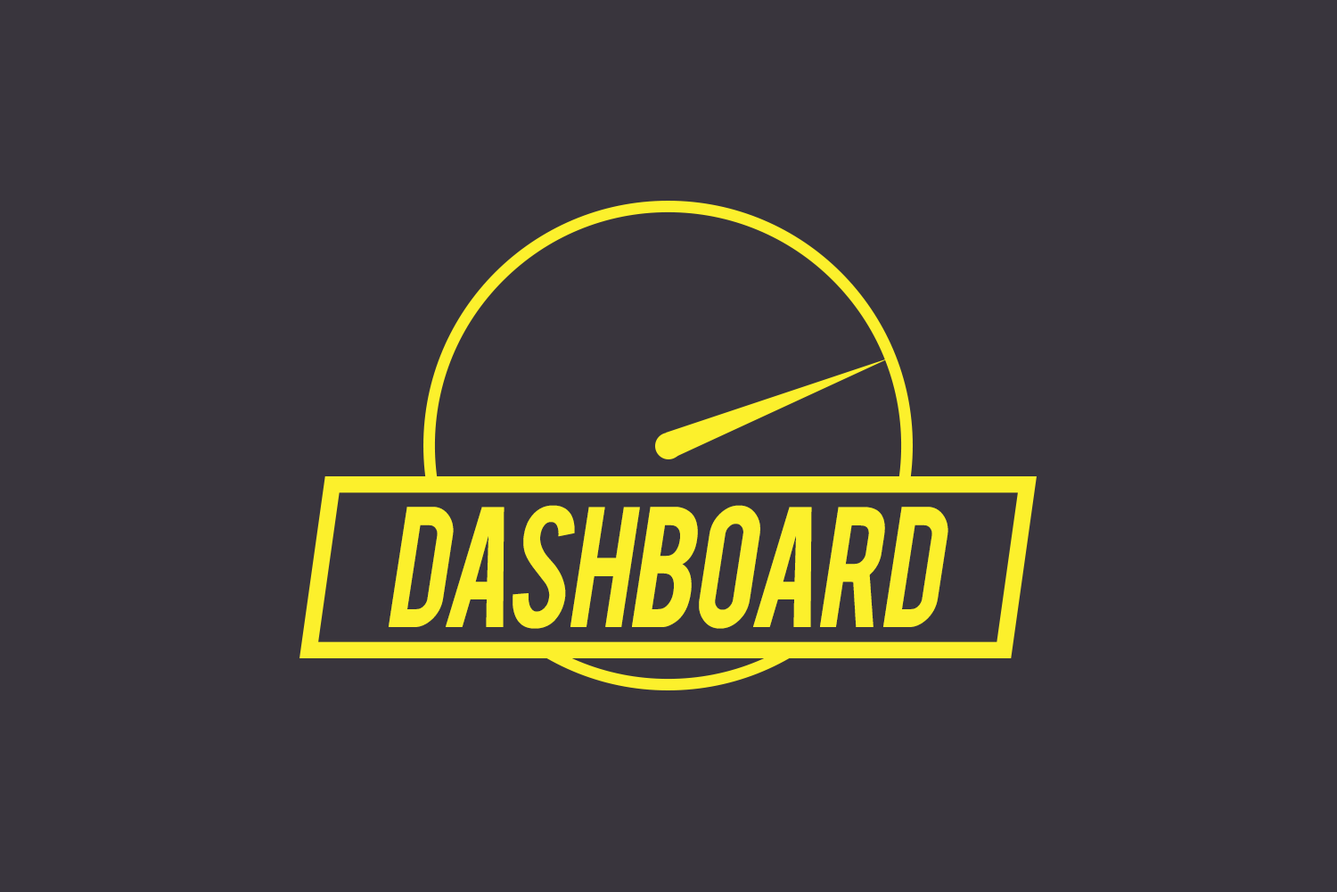
<style>
.page{position:relative;width:1337px;height:892px;background:#39353d}
.page>*{position:absolute;margin:0}
.t1{font:134.9px "Bebas";letter-spacing:-0.03em;color:#fcf02c;font-style:italic;scale:0.88 1}
</style>
<div class="page">
<p class="t1" style="left:389px;top:505px;width:560px;height:124px">Dashboard</p>
</div>
